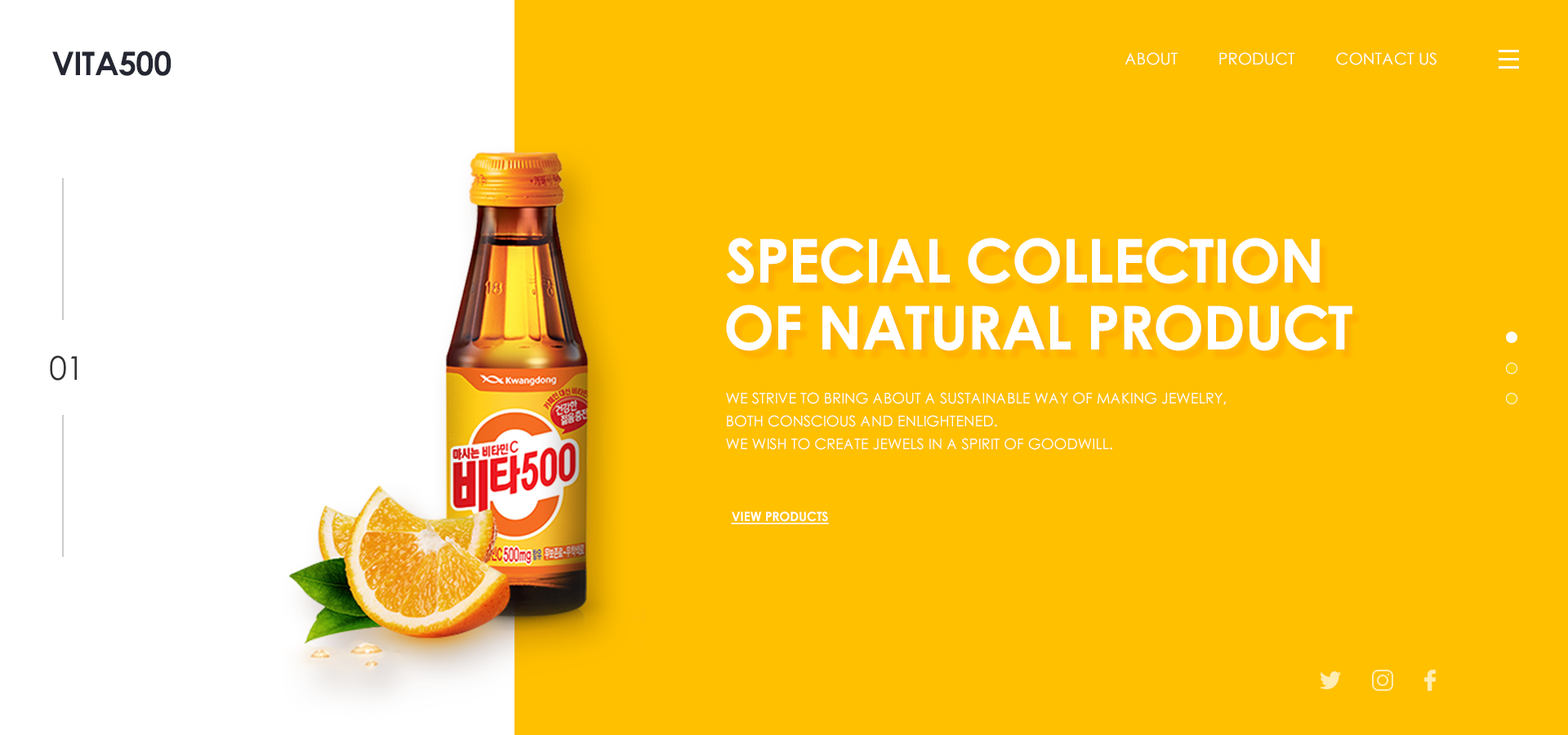
<style>
.page{position:relative;width:1568px;height:735px;background:#ffc000}
.page>*{position:absolute;margin:0}
.t1{font:32.7px "CenturyGothic-Bold";letter-spacing:-0.02em;color:#242732;text-transform:uppercase}
.t2{font:16.3px "CenturyGothic";color:#ffffff;text-transform:uppercase}
.t3{font:60.6px "CenturyGothic-Bold";letter-spacing:-0.02em;color:#ffffff;text-transform:uppercase}
.t4{font:32.7px "CenturyGothic";letter-spacing:-0.02em;color:#333333;text-transform:uppercase}
.t5{font:14.7px/22.9px "CenturyGothic";color:#ffffff;text-transform:uppercase}
.t6{font:12.7px "CenturyGothic-Bold";color:#ffffff;text-transform:uppercase;text-decoration:underline}
</style>
<div class="page">
<p class="t1" style="left:52px;top:51px;width:120px;height:25px">vita500</p>
<p class="t2" style="left:1125px;top:52px;width:312px;height:13px">About         Product         Contact us</p>
<p class="t3" style="left:726px;top:238px;width:594px;height:46px">Special collection</p>
<p class="t3" style="left:726px;top:305px;width:626px;height:46px">of natural product</p>
<p class="t4" style="left:50px;top:355px;width:27px;height:26px">01</p>
<p class="t5" style="left:726px;top:392px;width:501px;height:58px">We strive to bring about a sustainable way of making jewelry,<br>both conscious and enlightened.<br>We wish to create jewels in a spirit of goodwill.</p>
<p class="t6" style="left:731px;top:511px;width:98px;height:13px">vIEW PRODUCTS</p>
</div>
